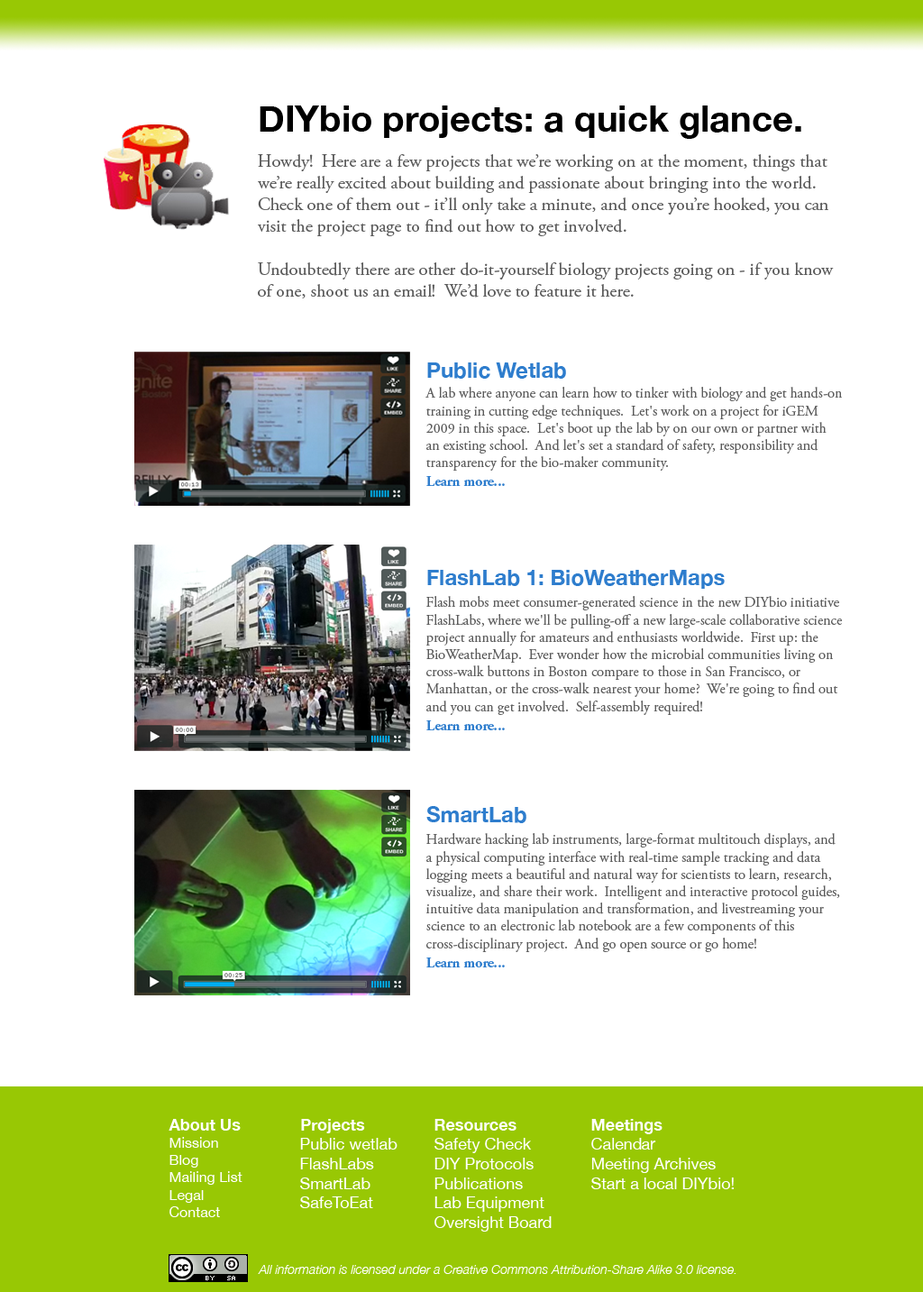
<style>
.page{position:relative;width:923px;height:1292px;background:#ffffff}
.page>*{position:absolute;margin:0}
.t1{font:36.1px "HelveticaNeue-Bold";color:#000000}
.t2{font:18px "AGaramondPro-Regular";color:#5b5b5b}
.t3{font:21.6px "HelveticaNeue-Bold";color:#2e7dcd}
.t4{font:14.4px "AGaramondPro-Regular";color:#5b5b5b}
.t5{font:14.4px "AGaramondPro-Bold";color:#2e7dcd}
.t6{font:14.4px "HelveticaNeue";color:#ffffff}
.t7{font:16.2px "HelveticaNeue-Bold";color:#ffffff}
.t8{font:16.2px "HelveticaNeue";color:#ffffff}
.t9{font:12.6px "HelveticaNeue-LightItalic";color:#ffffff}
</style>
<div class="page">
<p class="t1" style="left:260px;top:105px;width:541px;height:34px">DIYbio projects: a quick glance.</p>
<p class="t2" style="left:258px;top:154px;width:576px;height:144px">Howdy!  Here are a few projects that we’re working on at the moment, things that we’re really excited about building and passionate about bringing into the world.  Check one of them out - it’ll only take a minute, and once you’re hooked, you can visit the project page to find out how to get involved.<br><br>Undoubtedly there are other do-it-yourself biology projects going on - if you know of one, shoot us an email!  We’d love to feature it here.</p>
<p class="t3" style="left:427px;top:362px;width:139px;height:17px">Public Wetlab</p>
<p class="t4" style="left:425px;top:387px;width:417px;height:84px">A lab where anyone can learn how to tinker with biology and get hands-on training in cutting edge techniques.  Let's work on a project for iGEM 2009 in this space.  Let's boot up the lab by on our own or partner with an existing school.  And let's set a standard of safety, responsibility and transparency for the bio-maker community.</p>
<p class="t5" style="left:426px;top:476px;width:79px;height:10px">Learn more...</p>
<p class="t3" style="left:427px;top:570px;width:298px;height:19px">FlashLab 1: BioWeatherMaps</p>
<p class="t4" style="left:426px;top:596px;width:416px;height:119px">Flash mobs meet consumer-generated science in the new DIYbio initiative FlashLabs, where we'll be pulling-off a new large-scale collaborative science project annually for amateurs and enthusiasts worldwide.  First up: the BioWeatherMap.  Ever wonder how the microbial communities living on cross-walk buttons in Boston compare to those in San Francisco, or Manhattan, or the cross-walk nearest your home?  We're going to find out and you can get involved.  Self-assembly required!</p>
<p class="t5" style="left:426px;top:720px;width:79px;height:10px">Learn more...</p>
<p class="t3" style="left:426px;top:806px;width:100px;height:17px">SmartLab</p>
<p class="t4" style="left:425px;top:833px;width:415px;height:119px">Hardware hacking lab instruments, large-format multitouch displays, and a physical computing interface with real-time sample tracking and data logging meets a beautiful and natural way for scientists to learn, research, visualize, and share their work.  Intelligent and interactive protocol guides, intuitive data manipulation and transformation, and livestreaming your science to an electronic lab notebook are a few components of this cross-disciplinary project.  And go open source or go home!</p>
<p class="t5" style="left:426px;top:957px;width:79px;height:10px">Learn more...</p>
<p class="t6" style="left:169px;top:1119px;width:73px;height:98px"><span class="t7">About Us<br></span>Mission<br>Blog<br>Mailing List<br>Legal<br>Contact</p>
<p class="t8" style="left:300px;top:1119px;width:98px;height:89px"><span class="t7">Projects<br></span>Public wetlab<br>FlashLabs<br>SmartLab<br>SafeToEat</p>
<p class="t8" style="left:435px;top:1119px;width:117px;height:112px"><span class="t7">Resources<br></span>Safety Check<br>DIY Protocols<br>Publications<br>Lab Equipment<br>Oversight Board</p>
<p class="t8" style="left:591px;top:1119px;width:143px;height:70px"><span class="t7">Meetings<br></span>Calendar<br>Meeting Archives<br>Start a local DIYbio!</p>
<p class="t9" style="left:258px;top:1265px;width:478px;height:9px">All information is licensed under a Creative Commons Attribution-Share Alike 3.0 license.</p>
</div>
